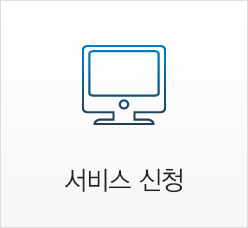
<style>
.page{position:relative;width:248px;height:228px}
.page>*{position:absolute;margin:0}
.t1{font:26px "YDVYGO32";letter-spacing:-0.025em;color:#222222;scale:0.95 1}
</style>
<div class="page">
<p class="t1" style="left:65px;top:168px;width:118px;height:25px">서비스 신청</p>
</div>
